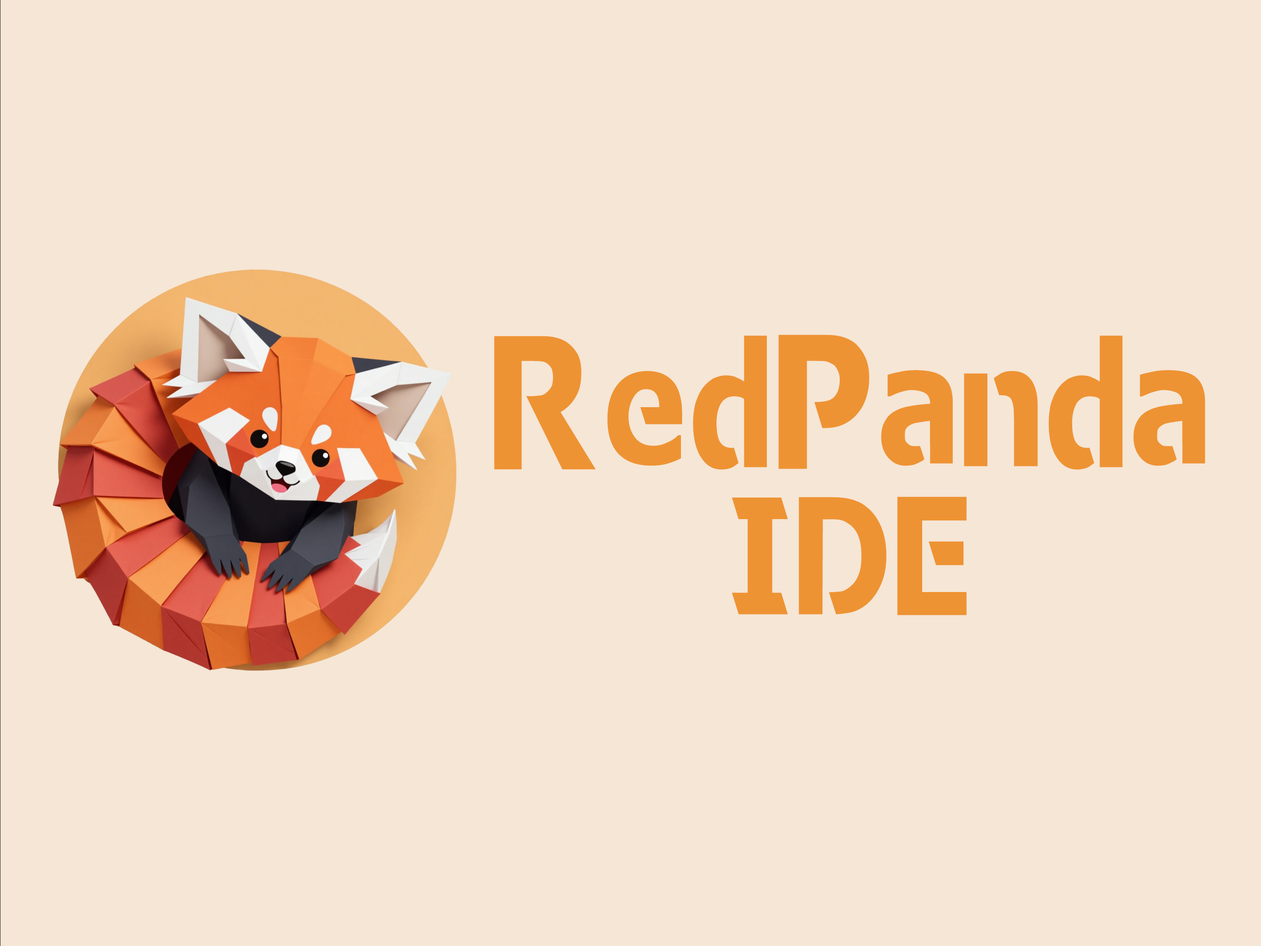
<style>
.page{position:relative;width:1261px;height:946px;background:#f6e6d5}
.page>*{position:absolute;margin:0}
.t1{font:172.2px "zihun111hao-jinbangzhaopaiti-Regular";color:#ee9333}
.t2{font:190.7px "zihun111hao-jinbangzhaopaiti-Regular";color:#ee9333}
.t3{font:170.6px "zihun111hao-jinbangzhaopaiti-Regular";color:#ee9333}
.t4{font:165.5px "zihun111hao-jinbangzhaopaiti-Regular";color:#ee9333}
.t5{font:193.5px "zihun111hao-jinbangzhaopaiti-Regular";color:#ee9333}
.t6{font:169px "zihun111hao-jinbangzhaopaiti-Regular";color:#ee9333}
</style>
<div class="page">
<p class="t1" style="left:494px;top:335px;width:711px;height:135px"><span class="t2">R</span><span class="t3">e</span><span class="t4">d</span><span class="t5">P</span>an<span class="t4">d</span>a</p>
<p class="t6" style="left:732px;top:496px;width:235px;height:119px">IDE</p>
</div>
